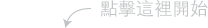
<style>
.page{position:relative;width:208px;height:28px;background:#ffffff}
.page>*{position:absolute;margin:0}
.t1{font:18px "STHeitiSC-Light";letter-spacing:0.005em;color:#c0c4c6}
</style>
<div class="page">
<p class="t1" style="left:100px;top:0px;width:108px;height:17px">點擊這裡開始</p>
</div>
